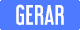
<style>
.page{position:relative;width:80px;height:30px;background:#4d7aff}
.page>*{position:absolute;margin:0}
.t1{font:25px "LibelSuitRg-Regular";letter-spacing:0.01em;color:#ffffff}
</style>
<div class="page">
<p class="t1" style="left:16px;top:4px;width:48px;height:22px">GERAR</p>
</div>
